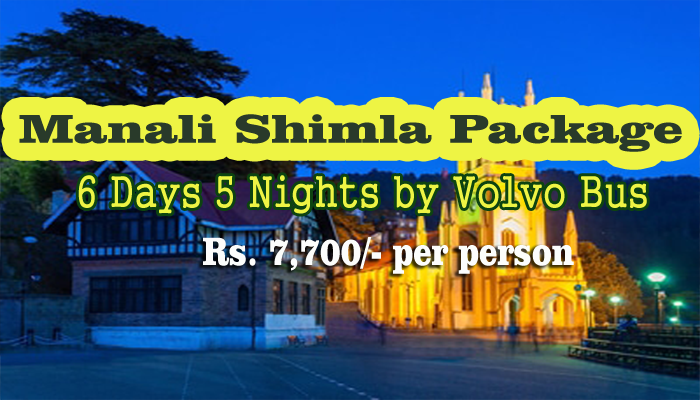
<style>
.page{position:relative;width:700px;height:400px}
.page>*{position:absolute;margin:0}
.t1{font:41.4px "ClarendonBT-Black";color:#293a2a;scale:1.29 1}
.t2{font:43.5px "Gungsuh";color:#eef444;scale:0.84 1}
.t3{font:40.6px "ClarendonBT-Black";color:#fcfdfc;scale:0.79 1}
</style>
<div class="page">
<p class="t1" style="left:19px;top:114px;width:663px;height:38px">Manali Shimla Package</p>
<p class="t2" style="left:78px;top:175px;width:569px;height:39px">6 Days 5 Nights by Volvo Bus</p>
<p class="t3" style="left:203px;top:237px;width:371px;height:37px">Rs. 7,700/- per person</p>
</div>
